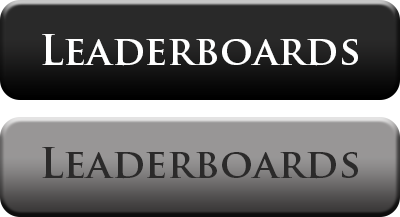
<style>
.page{position:relative;width:400px;height:217px}
.page>*{position:absolute;margin:0}
.t1{font:40px "TrajanPro-Bold";color:#ffffff}
.t2{font:40px "TrajanPro-Bold";color:#2b2a2a}
</style>
<div class="page">
<p class="t1" style="left:42px;top:34px;width:316px;height:32px">Leaderboards</p>
<p class="t2" style="left:42px;top:147px;width:316px;height:32px">Leaderboards</p>
</div>
